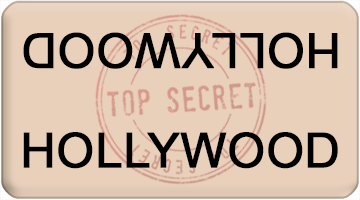
<style>
.page{position:relative;width:360px;height:200px;background:#e8d0bb}
.page>*{position:absolute;margin:0}
.t1{font:48px "ArialMT";color:#000000;font-weight:bold}
</style>
<div class="page">
<p class="t1" style="left:23px;top:32px;width:315px;height:37px;rotate:180deg">HOLLYWOOD</p>
<p class="t1" style="left:23px;top:132px;width:315px;height:37px">HOLLYWOOD</p>
</div>
